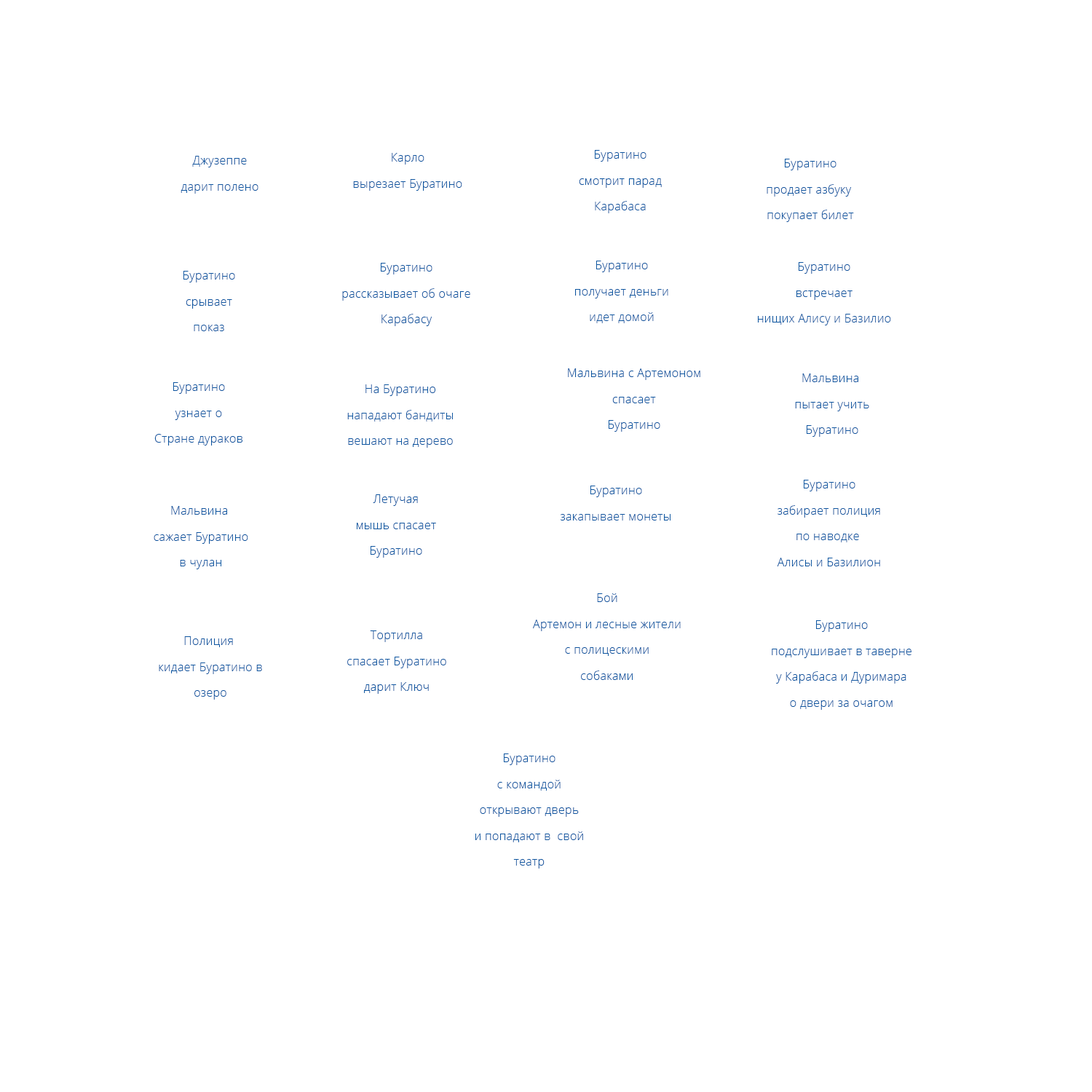
<style>
.page{position:relative;width:1092px;height:1092px;background:#ffffff}
.page>*{position:absolute;margin:0}
.t1{font:11.6px/25.9px "OpenSans-Light";letter-spacing:0.02em;color:#0e56a0}
</style>
<div class="page">
<p class="t1" style="left:579px;top:150px;width:83px;height:63px;text-align:center">Буратино<br>смотрит парад<br>Карабаса</p>
<p class="t1" style="left:181px;top:156px;width:77px;height:38px;text-align:center">Джузеппе<br>дарит полено</p>
<p class="t1" style="left:353px;top:153px;width:109px;height:38px;text-align:center">Карло<br>вырезает Буратино</p>
<p class="t1" style="left:767px;top:159px;width:87px;height:63px;text-align:center">Буратино<br>продает азбуку <br>покупает билет</p>
<p class="t1" style="left:342px;top:263px;width:128px;height:63px;text-align:center">Буратино<br>рассказывает об очаге<br>Карабасу</p>
<p class="t1" style="left:575px;top:261px;width:93px;height:62px;text-align:center">Буратино<br>получает деньги<br>идет домой</p>
<p class="t1" style="left:758px;top:262px;width:133px;height:63px;text-align:center">Буратино<br>встречает<br>нищих Алису и Базилио</p>
<p class="t1" style="left:183px;top:271px;width:52px;height:60px;text-align:center">Буратино<br>срывает<br>показ</p>
<p class="t1" style="left:568px;top:368px;width:132px;height:64px;text-align:center">Мальвина с Артемоном<br>спасает<br>Буратино</p>
<p class="t1" style="left:795px;top:373px;width:74px;height:64px;text-align:center">Мальвина <br>пытает учить<br>Буратино</p>
<p class="t1" style="left:154px;top:382px;width:88px;height:64px;text-align:center">Буратино<br>узнает о<br>Стране дураков</p>
<p class="t1" style="left:347px;top:384px;width:106px;height:64px;text-align:center">На Буратино<br>нападают бандиты<br>вешают на дерево</p>
<p class="t1" style="left:560px;top:486px;width:110px;height:35px;text-align:center">Буратино<br>закапывает монеты</p>
<p class="t1" style="left:777px;top:480px;width:103px;height:86px;text-align:center">Буратино<br>забирает полиция<br>по наводке <br>Алисы и Базилион</p>
<p class="t1" style="left:357px;top:494px;width:79px;height:64px;text-align:center">Летучая<br>мышь спасает<br>Буратино</p>
<p class="t1" style="left:154px;top:506px;width:94px;height:63px;text-align:center">Мальвина <br>сажает Буратино<br>в чулан</p>
<p class="t1" style="left:533px;top:593px;width:148px;height:87px;text-align:center">Бой<br>Артемон и лесные жители<br>с полицескими<br>собаками</p>
<p class="t1" style="left:772px;top:620px;width:139px;height:90px;text-align:center">Буратино<br>подслушивает в таверне<br>у Карабаса и Дуримара<br>о двери за очагом</p>
<p class="t1" style="left:159px;top:636px;width:103px;height:64px;text-align:center">Полиция <br>кидает Буратино в<br>озеро</p>
<p class="t1" style="left:347px;top:630px;width:99px;height:64px;text-align:center">Тортилла<br>спасает Буратино<br>дарит Ключ</p>
<p class="t1" style="left:475px;top:753px;width:108px;height:115px;text-align:center">Буратино<br>с командой<br>открывают дверь<br>и попадают в  свой<br>театр</p>
</div>
